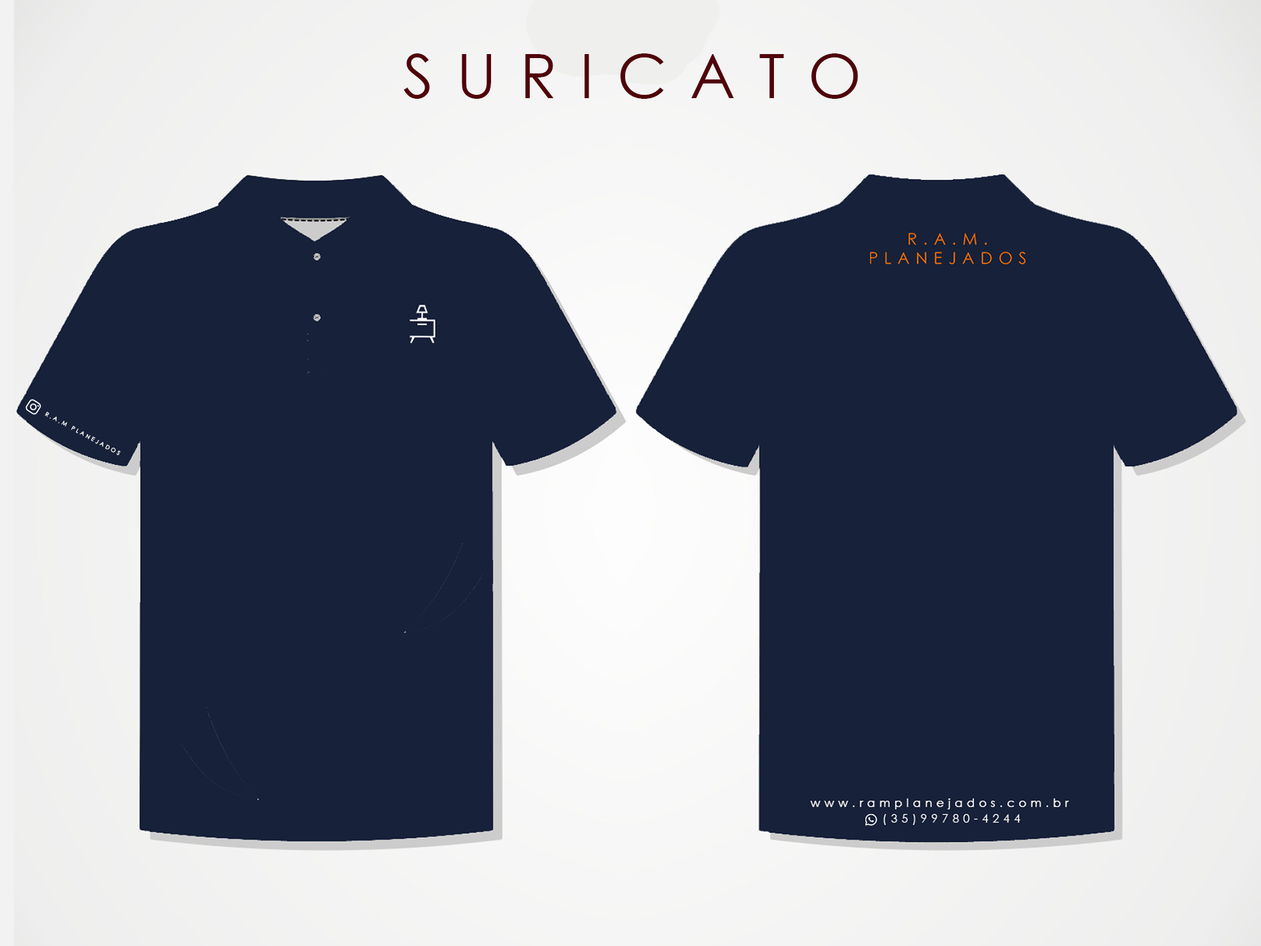
<style>
.page{position:relative;width:1261px;height:946px;background:#172139}
.page>*{position:absolute;margin:0}
.t1{font:61.2px "CenturyGothic";letter-spacing:0.38em;color:#50020a}
.t2{font:5.6px "CenturyGothic";letter-spacing:0.38em;color:#ffffff}
</style>
<div class="page">
<p class="t1" style="left:404px;top:53px;width:454px;height:46px">SURICATO</p>
<p class="t2" style="left:45px;top:412px;width:76px;height:43px;rotate:29deg">R.A.M PLANEJADOS</p>
</div>
